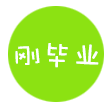
<style>
.page{position:relative;width:108px;height:108px;background:#8ce212}
.page>*{position:absolute;margin:0}
.t1{font:30px "DFWaWaSC-W5";color:#ffffff}
</style>
<div class="page">
<p class="t1" style="left:15px;top:43px;width:84px;height:25px">刚毕业</p>
</div>
